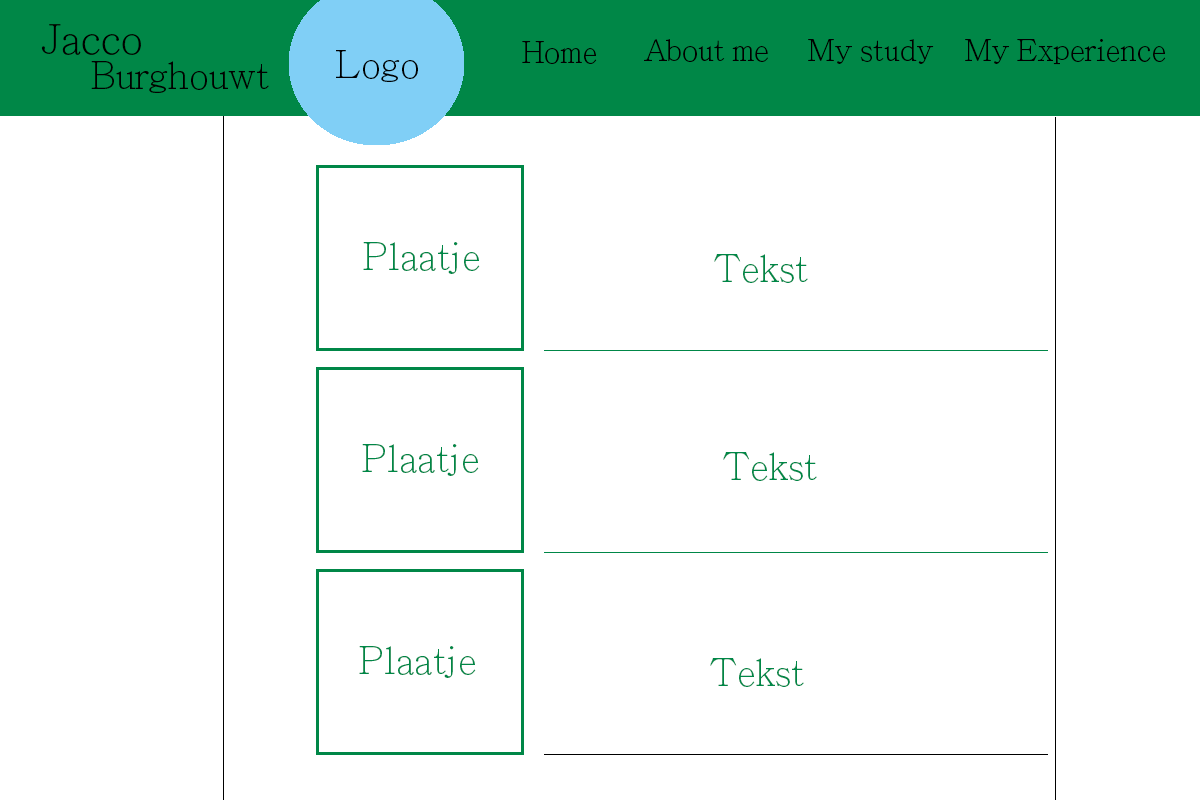
<style>
.page{position:relative;width:1200px;height:800px;background:#ffffff}
.page>*{position:absolute;margin:0}
.t1{font:40px "AdobeMingStd-Light";color:#000000}
.t2{font:30px "AdobeMingStd-Light";color:#000000}
.t3{font:37px "AdobeMingStd-Light";color:#000000}
.t4{font:37px "AdobeMingStd-Light";color:#008747}
</style>
<div class="page">
<p class="t1" style="left:41px;top:24px;width:100px;height:31px">Jacco</p>
<p class="t2" style="left:522px;top:41px;width:75px;height:23px">Home</p>
<p class="t2" style="left:644px;top:39px;width:124px;height:23px">About me</p>
<p class="t2" style="left:808px;top:39px;width:126px;height:25px">My study</p>
<p class="t2" style="left:965px;top:39px;width:201px;height:26px">My Experience</p>
<p class="t3" style="left:336px;top:50px;width:82px;height:32px">Logo</p>
<p class="t3" style="left:91px;top:61px;width:178px;height:32px">Burghouwt</p>
<p class="t4" style="left:363px;top:242px;width:117px;height:32px">Plaatje</p>
<p class="t4" style="left:714px;top:254px;width:94px;height:29px">Tekst</p>
<p class="t4" style="left:362px;top:444px;width:117px;height:32px">Plaatje</p>
<p class="t4" style="left:723px;top:452px;width:94px;height:29px">Tekst</p>
<p class="t4" style="left:359px;top:646px;width:117px;height:32px">Plaatje</p>
<p class="t4" style="left:710px;top:658px;width:94px;height:29px">Tekst</p>
</div>
